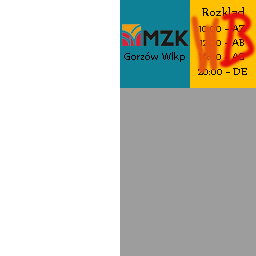
<style>
.page{position:relative;width:256px;height:256px;background:#ffffff}
.page>*{position:absolute;margin:0}
.t1{font:14px "Nyala-Regular";color:#0c0c0c}
.t2{font:12px "Nyala-Regular"}
.t3{font:10px "Tahoma";color:#000000}
</style>
<div class="page">
<p class="t1" style="left:202px;top:7px;width:42px;height:9px">Rozklad</p>
<p class="t2" style="left:198px;top:25px;width:49px;height:50px;text-align:center">10:00 - AZ<br>12:00 - AB<br>16:00 - AG<br>20:00 - DE</p>
<p class="t3" style="left:124px;top:52px;width:61px;height:10px">Gorzów Wlkp</p>
</div>
